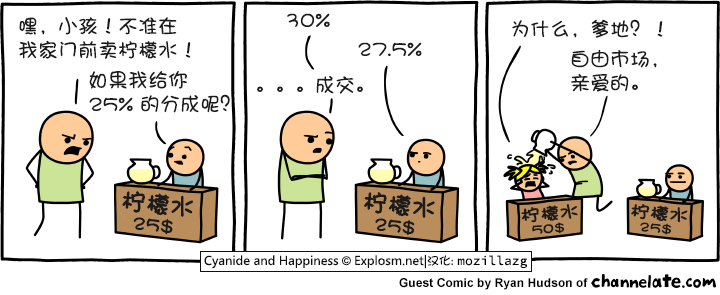
<style>
.page{position:relative;width:720px;height:295px;background:#ffffff}
.page>*{position:absolute;margin:0}
.t1{font:20px/24px "DFPShaoNvW5";color:#1b1b1b}
.t2{font:20px "DFPShaoNvW5";color:#1b1b1b}
.t3{font:24px/24px "DFPShaoNvW5";color:#1b1b1b;font-weight:bold}
.t4{font:18px/24px "DFPShaoNvW5";color:#1b1b1b;font-weight:bold}
.t5{font:17px/17px "DFPShaoNvW5";color:#1b1b1b;font-weight:bold;scale:1.12 1}
.t6{font:12.8px/17px "DFPShaoNvW5";color:#1b1b1b;font-weight:bold;scale:1.12 1}
</style>
<div class="page">
<p class="t1" style="left:18px;top:17px;width:173px;height:42px">嘿，小孩！不准在<br>我家门前卖柠檬水！</p>
<p class="t2" style="left:287px;top:13px;width:43px;height:14px">30%</p>
<p class="t2" style="left:512px;top:19px;width:151px;height:19px">为什么，爹地？！</p>
<p class="t2" style="left:358px;top:42px;width:64px;height:14px">27.5%</p>
<p class="t1" style="left:570px;top:49px;width:87px;height:43px">自由市场，<br>亲爱的。</p>
<p class="t1" style="left:89px;top:71px;width:141px;height:42px">如果我给你<br>25% 的分成呢？</p>
<p class="t2" style="left:257px;top:76px;width:106px;height:18px">。。。成交。</p>
<p class="t3" style="left:122px;top:191px;width:72px;height:44px;rotate:6deg">柠檬水<br><span class="t4">  25$</span></p>
<p class="t3" style="left:364px;top:192px;width:71px;height:44px;rotate:6deg">柠檬水<br><span class="t4">  25$</span></p>
<p class="t5" style="left:521px;top:204px;width:57px;height:30px;rotate:-5deg">柠檬水<br><span class="t6">  50$</span></p>
<p class="t5" style="left:631px;top:204px;width:57px;height:31px;rotate:5deg">柠檬水<br><span class="t6">  25$</span></p>
</div>
